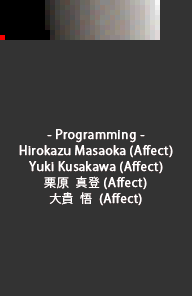
<style>
.page{position:relative;width:192px;height:296px;background:#333333}
.page>*{position:absolute;margin:0}
.t1{font:12px/16px "KozGoPr6N-Regular";letter-spacing:0.025em;color:#ffffff;font-weight:bold}
.t2{font:12px/16px "KozGoPr6N-Regular";letter-spacing:0.025em;color:#ffffff}
</style>
<div class="page">
<p class="t1" style="left:19px;top:129px;width:154px;height:77px;text-align:center">- Programming -<br>Hirokazu Masaoka (Affect)<br>Yuki Kusakawa (Affect)<br><span class="t2">栗原  真登</span> (Affect)<br><span class="t2">大貴  悟 </span> (Affect)</p>
</div>
